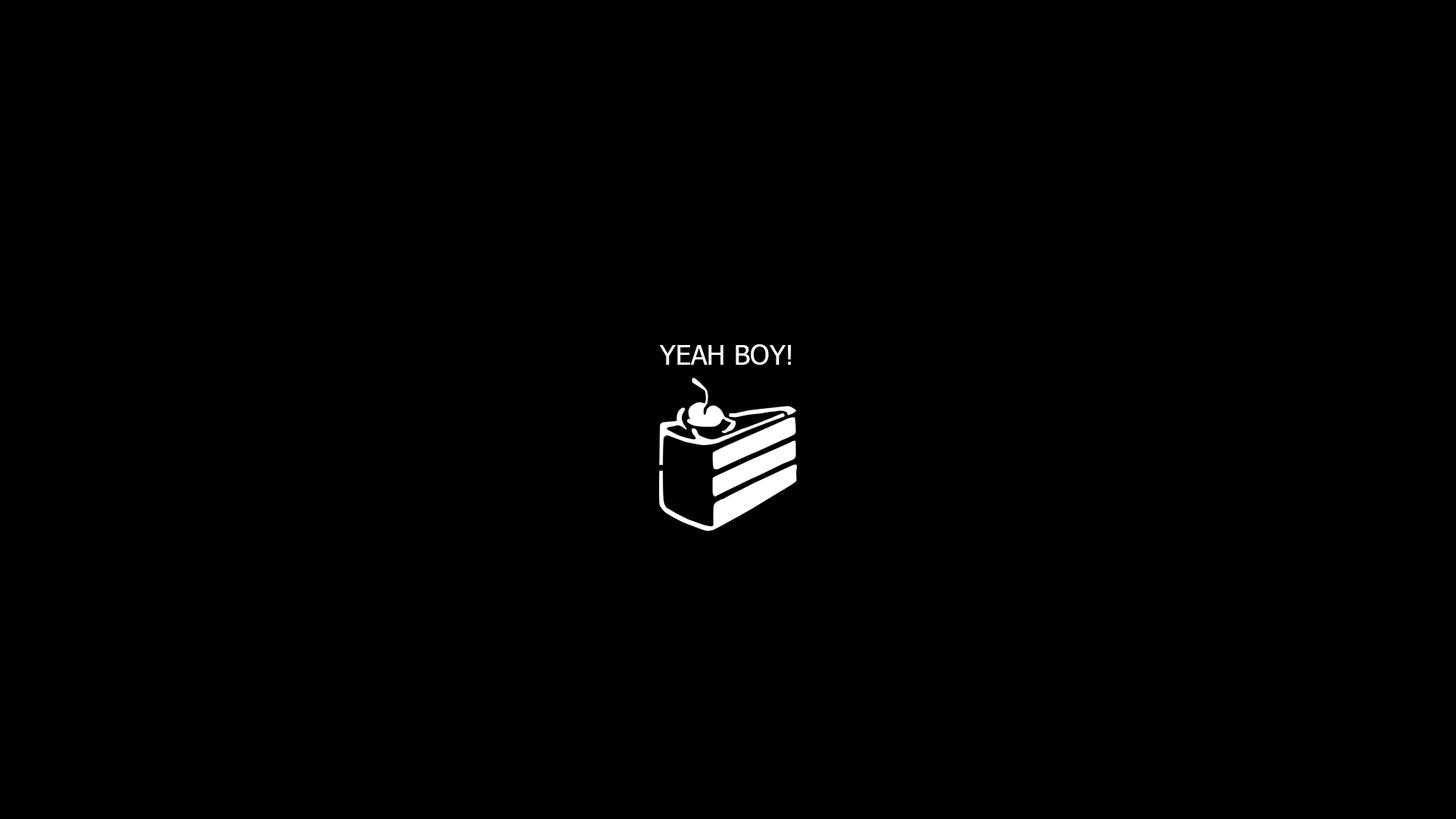
<style>
.page{position:relative;width:1456px;height:819px;background:#000000}
.page>*{position:absolute;margin:0}
.t1{font:27.3px "Tahoma";color:#ffffff}
</style>
<div class="page">
<p class="t1" style="left:660px;top:344px;width:131px;height:21px">YEAH BOY!</p>
</div>
